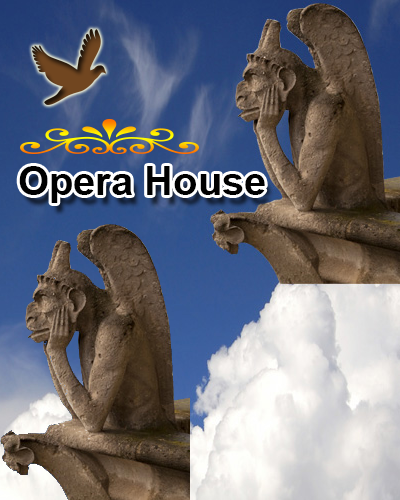
<style>
.page{position:relative;width:400px;height:500px}
.page>*{position:absolute;margin:0}
.t1{font:40px "Arial-BoldMT";color:#000000}
</style>
<div class="page">
<p class="t1" style="left:19px;top:166px;width:246px;height:37px">Opera House</p>
</div>
